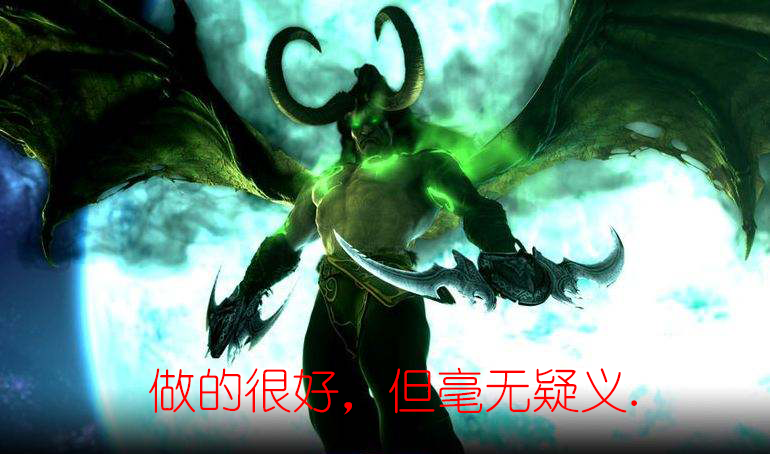
<style>
.page{position:relative;width:770px;height:454px}
.page>*{position:absolute;margin:0}
.t1{font:48px "YouYuan";color:#ff0000}
</style>
<div class="page">
<p class="t1" style="left:149px;top:367px;width:488px;height:48px">做的很好，但毫无疑义.</p>
</div>
